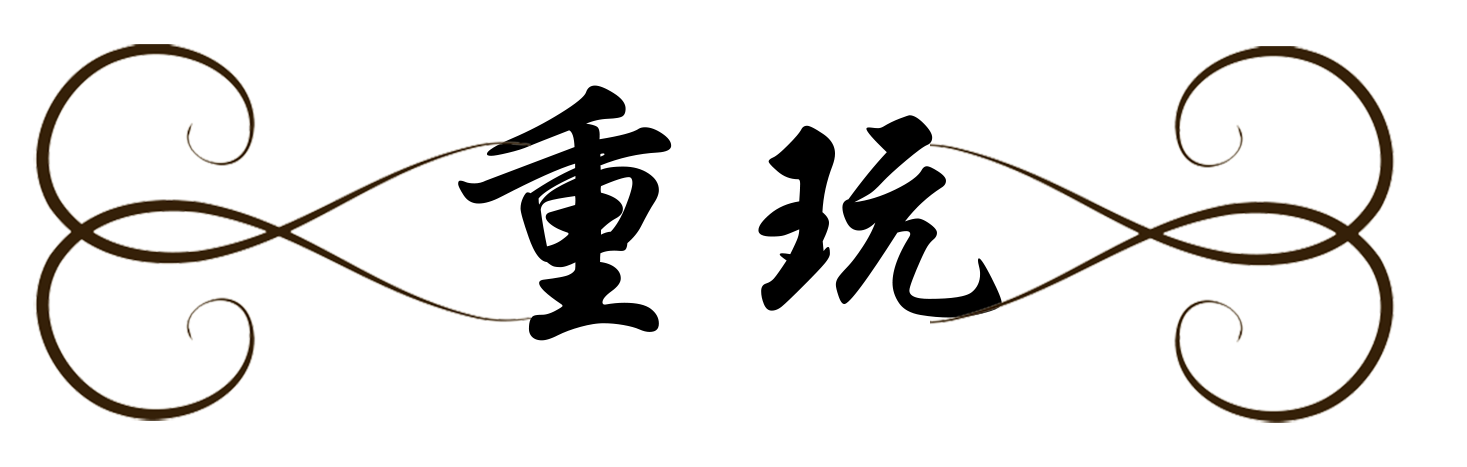
<style>
.page{position:relative;width:1467px;height:467px;background:#ffffff}
.page>*{position:absolute;margin:0}
.t1{font:300px "STXingkai";color:#000000}
</style>
<div class="page">
<p class="t1" style="left:458px;top:85px;width:544px;height:256px">重玩</p>
</div>
